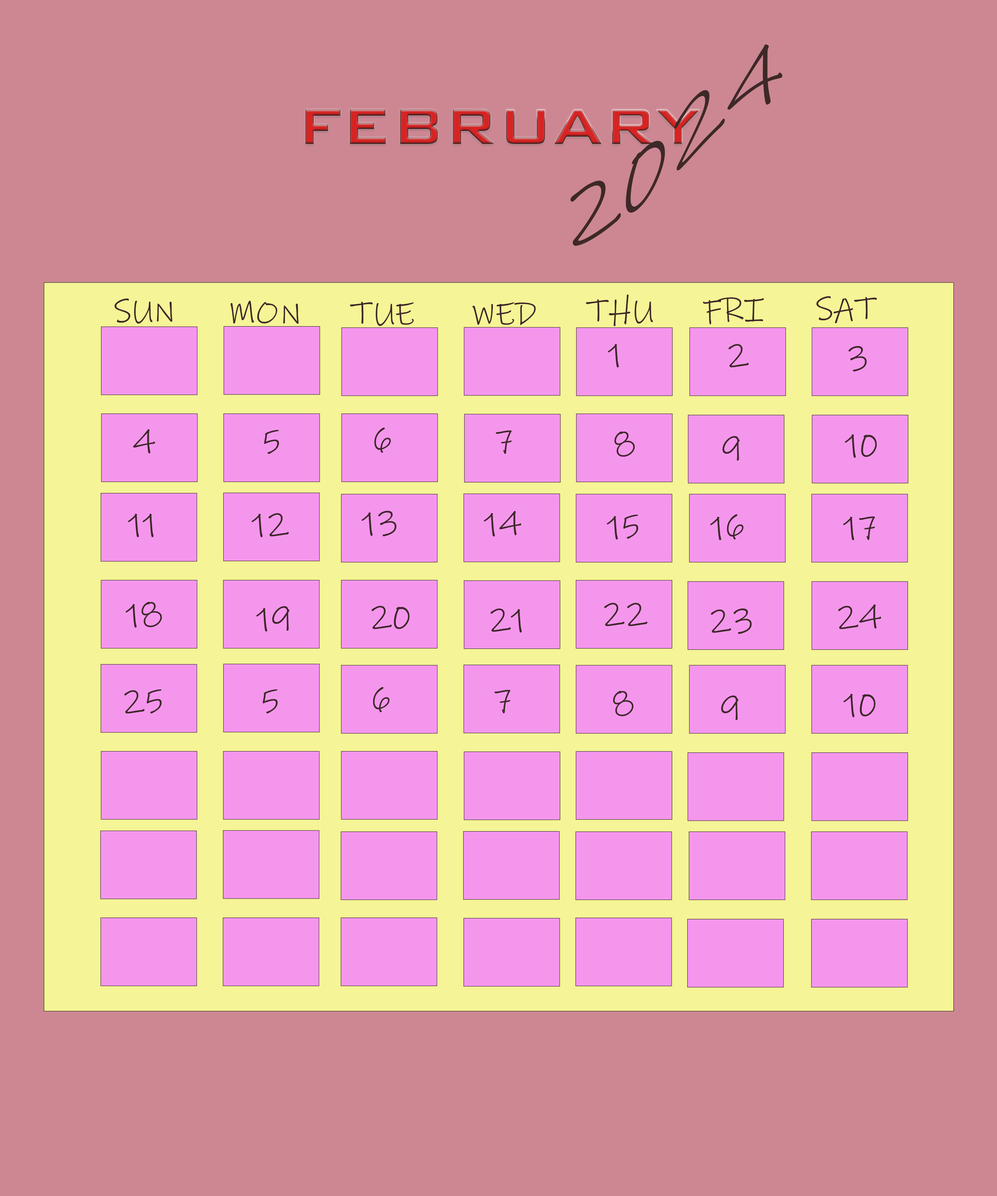
<style>
.page{position:relative;width:997px;height:1196px;background:#cc8792}
.page>*{position:absolute;margin:0}
.t1{font:83.1px "InkFree";color:#3e2828}
.t2{font:66.5px "BankGothicBT-Medium"}
.t3{font:33.2px "InkFree";color:#3e2828}
</style>
<div class="page">
<p class="t1" style="left:570px;top:44px;width:212px;height:202px;text-align:center">2024</p>
<p class="t2" style="left:305px;top:110px;width:395px;height:34px">FEBRUARY</p>
<p class="t3" style="left:114px;top:298px;width:58px;height:26px">SUN</p>
<p class="t3" style="left:230px;top:301px;width:69px;height:23px">MON</p>
<p class="t3" style="left:350px;top:301px;width:64px;height:25px">TUE</p>
<p class="t3" style="left:472px;top:302px;width:64px;height:23px">WED</p>
<p class="t3" style="left:586px;top:294px;width:67px;height:32px">THU</p>
<p class="t3" style="left:703px;top:297px;width:61px;height:28px">FRI</p>
<p class="t3" style="left:816px;top:296px;width:61px;height:27px">SAT</p>
<p class="t3" style="left:608px;top:344px;width:11px;height:24px">1</p>
<p class="t3" style="left:728px;top:344px;width:21px;height:24px">2</p>
<p class="t3" style="left:848px;top:346px;width:19px;height:25px">3</p>
<p class="t3" style="left:133px;top:429px;width:22px;height:25px">4</p>
<p class="t3" style="left:264px;top:430px;width:15px;height:24px">5</p>
<p class="t3" style="left:374px;top:428px;width:17px;height:25px">6</p>
<p class="t3" style="left:496px;top:430px;width:16px;height:24px">7</p>
<p class="t3" style="left:614px;top:431px;width:21px;height:26px">8</p>
<p class="t3" style="left:722px;top:436px;width:18px;height:25px">9</p>
<p class="t3" style="left:845px;top:434px;width:32px;height:24px">10</p>
<p class="t3" style="left:128px;top:514px;width:26px;height:23px">11</p>
<p class="t3" style="left:252px;top:513px;width:37px;height:24px">12</p>
<p class="t3" style="left:362px;top:511px;width:34px;height:25px">13</p>
<p class="t3" style="left:484px;top:511px;width:37px;height:26px">14</p>
<p class="t3" style="left:607px;top:515px;width:31px;height:25px">15</p>
<p class="t3" style="left:710px;top:514px;width:33px;height:26px">16</p>
<p class="t3" style="left:843px;top:516px;width:32px;height:24px">17</p>
<p class="t3" style="left:126px;top:602px;width:36px;height:26px">18</p>
<p class="t3" style="left:371px;top:606px;width:39px;height:23px">20</p>
<p class="t3" style="left:604px;top:603px;width:43px;height:23px">22</p>
<p class="t3" style="left:838px;top:604px;width:43px;height:25px">24</p>
<p class="t3" style="left:256px;top:606px;width:33px;height:26px">19</p>
<p class="t3" style="left:490px;top:608px;width:32px;height:25px">21</p>
<p class="t3" style="left:711px;top:608px;width:41px;height:26px">23</p>
<p class="t3" style="left:124px;top:689px;width:38px;height:25px">25</p>
<p class="t3" style="left:263px;top:689px;width:15px;height:25px">5</p>
<p class="t3" style="left:373px;top:687px;width:16px;height:25px">6</p>
<p class="t3" style="left:494px;top:690px;width:16px;height:24px">7</p>
<p class="t3" style="left:613px;top:691px;width:20px;height:25px">8</p>
<p class="t3" style="left:721px;top:695px;width:17px;height:25px">9</p>
<p class="t3" style="left:843px;top:694px;width:33px;height:23px">10</p>
</div>
